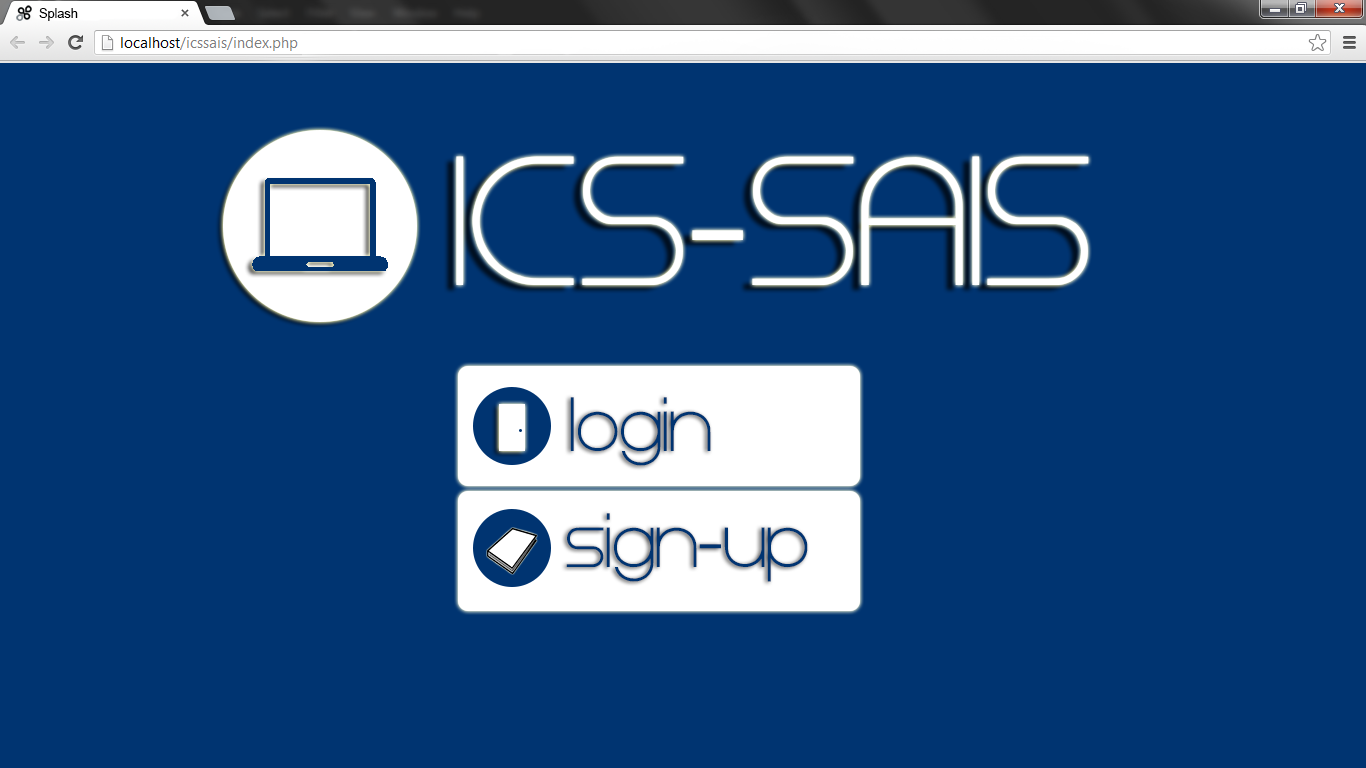
<style>
.page{position:relative;width:1366px;height:768px;background:#003471}
.page>*{position:absolute;margin:0}
.t1{font:12.7px "ArialMT";color:#000000}
.t2{font:153.3px "Steiner";color:#ffffff}
.t3{font:64px "Steiner";color:#003471}
</style>
<div class="page">
<p class="t1" style="left:39px;top:8px;width:39px;height:13px">Splash</p>
<p class="t2" style="left:456px;top:156px;width:633px;height:129px">ICS-SAIS</p>
<p class="t3" style="left:570px;top:397px;width:141px;height:69px">login</p>
<p class="t3" style="left:566px;top:513px;width:242px;height:69px">sign-up</p>
</div>
